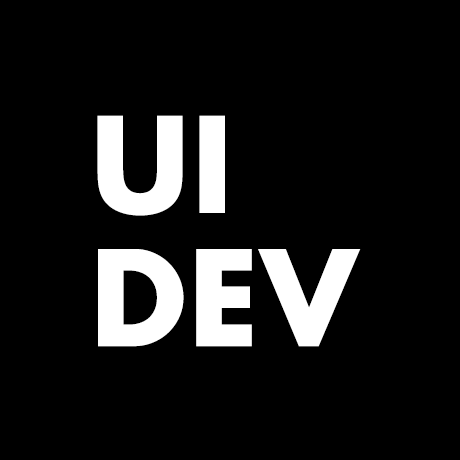
<style>
.page{position:relative;width:460px;height:460px;background:#000000}
.page>*{position:absolute;margin:0}
.t1{font:128.7px/133.2px "FuturaLT-Bold";letter-spacing:0.01em;color:#ffffff;text-transform:uppercase}
</style>
<div class="page">
<p class="t1" style="left:97px;top:115px;width:264px;height:232px">UI<br>DEV</p>
</div>
